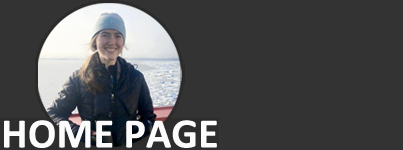
<style>
.page{position:relative;width:403px;height:150px;background:#333333}
.page>*{position:absolute;margin:0}
.t1{font:42px "Calibri-Bold";color:#fcfcfc}
</style>
<div class="page">
<p class="t1" style="left:4px;top:120px;width:213px;height:28px">H O M E PAGE</p>
</div>
